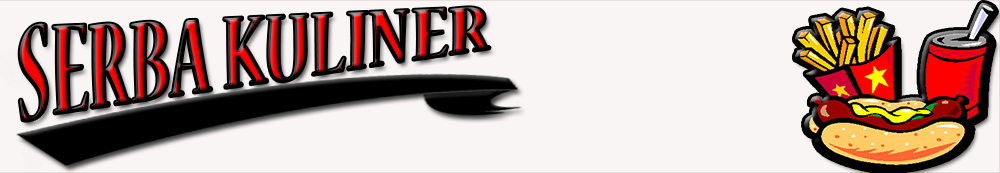
<style>
.page{position:relative;width:1000px;height:173px;background:#faf5f5}
.page>*{position:absolute;margin:0}
.t1{font:109.5px "NuevaStd-BoldCond";scale:0.76 1}
</style>
<div class="page">
<p class="t1" style="left:19px;top:7px;width:471px;height:114px">SERBA KULINER</p>
</div>
